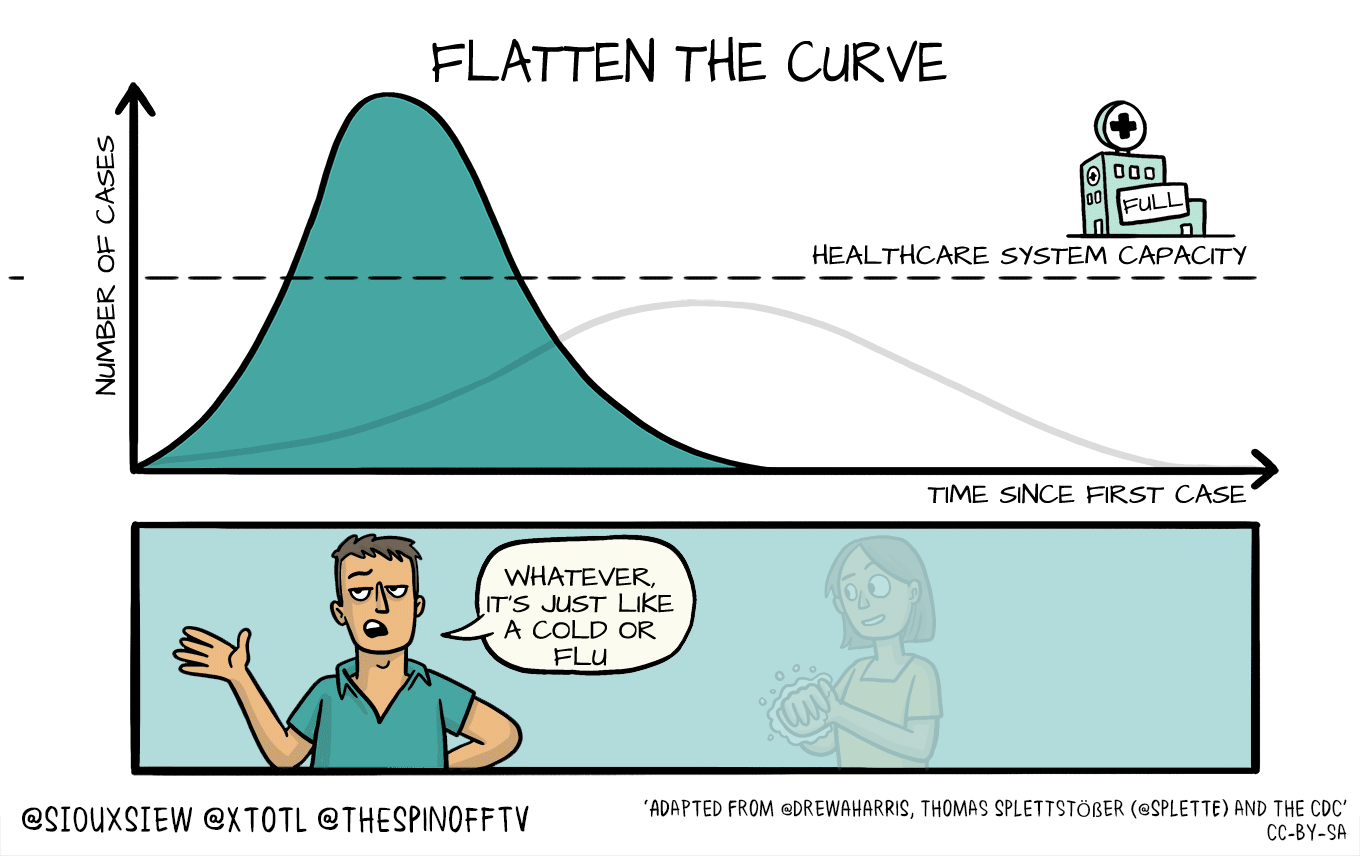
<style>
.page{position:relative;width:1360px;height:856px;background:#ffffff}
.page>*{position:absolute;margin:0}
.t1{font:49.9px "ArchitectsDaughter";color:#000000;scale:0.8 1}
.t2{font:22.1px "ArchitectsDaughter";color:#000000}
.t3{font:18.3px "ArchitectsDaughter";color:#000000}
</style>
<div class="page">
<p class="t1" style="left:432px;top:36px;width:515px;height:47px">FLATTEN THE CURVE</p>
<p class="t2" style="left:95px;top:135px;width:21px;height:260px;rotate:-90deg">NUMBER OF CASES</p>
<p class="t3" style="left:1123px;top:192px;width:61px;height:22px;rotate:-8deg">FULL</p>
<p class="t2" style="left:812px;top:244px;width:435px;height:21px">HEALTHCARE SYSTEM CAPACITY</p>
<p class="t2" style="left:927px;top:483px;width:320px;height:21px">TIME SINCE FIRST CASE</p>
<p class="t2" style="left:487px;top:565px;width:187px;height:101px;text-align:center">WHATEVER,<br>IT’S JUST LIKE<br>A COLD OR<br>FLU</p>
</div>
